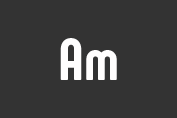
<style>
.page{position:relative;width:177px;height:118px;background:#333333}
.page>*{position:absolute;margin:0}
.t1{font:58.3px "Phenomena-ExtraBold";color:#fffefe}
</style>
<div class="page">
<p class="t1" style="left:60px;top:38px;width:57px;height:42px">Am</p>
</div>
